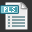
<style>
.page{position:relative;width:32px;height:32px;background:#333333}
.page>*{position:absolute;margin:0}
.t1{font:8px "Pixelated";color:#ffffff;text-transform:uppercase}
</style>
<div class="page">
<p class="t1" style="left:4px;top:7px;width:11px;height:5px">PLS</p>
</div>
